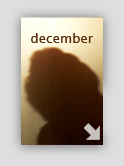
<style>
.page{position:relative;width:124px;height:166px;background:#dedede}
.page>*{position:absolute;margin:0}
.t1{font:13.1px "LucidaSansUnicode";color:#592a0c}
</style>
<div class="page">
<p class="t1" style="left:31px;top:33px;width:62px;height:10px">december</p>
</div>
